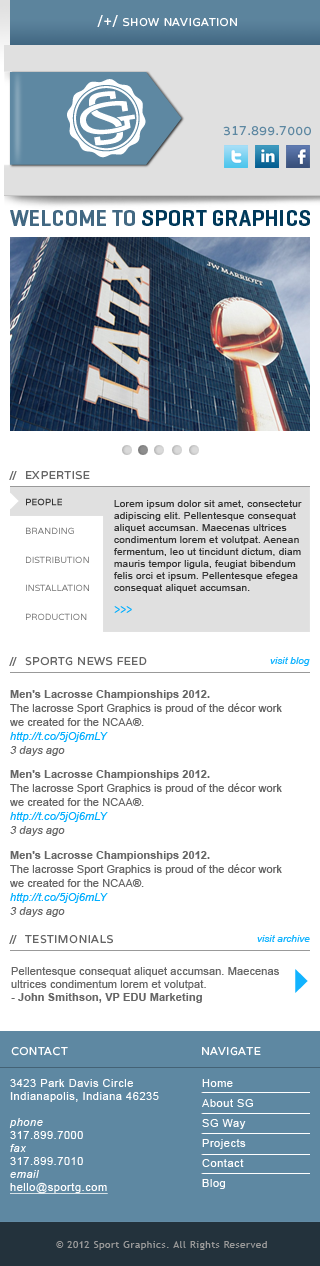
<style>
.page{position:relative;width:320px;height:1266px;background:#ffffff}
.page>*{position:absolute;margin:0}
.t1{font:11px "Varela";letter-spacing:0.05em;color:#fefefe}
.t2{font:14px "Varela";letter-spacing:0.05em;color:#fefefe}
.t3{font:12px "Varela";letter-spacing:0.05em;color:#5e88a2}
.t4{font:23px "Geogrotesque-SemiBold";color:#00395a}
.t5{font:23px "Geogrotesque-SemiBold";color:#426882}
.t6{font:11px "Varela";letter-spacing:0.05em;color:#666666}
.t7{font:9px "Varela";color:#333333;font-weight:bold}
.t8{font:10px/12px "ArialMT";letter-spacing:0.025em;color:#333333}
.t9{font:15px/12px "Arial-ItalicMT";letter-spacing:0.01em;color:#00aeff;scale:0.67 1}
.t10{font:9px "Varela";color:#717171}
.t11{font:10px "Arial-ItalicMT";letter-spacing:0.005em;color:#11b3ff}
.t12{font:11px/14px "ArialMT";letter-spacing:0.005em;color:#666666}
.t13{font:11px/14px "Arial-BoldMT";letter-spacing:0.005em;color:#666666}
.t14{font:11px/14px "Arial-ItalicMT";letter-spacing:0.005em;color:#00aeff}
.t15{font:11px/14px "Arial-ItalicMT";letter-spacing:0.005em;color:#666666}
.t16{font:11px/13px "ArialMT";letter-spacing:0.01em;color:#666666}
.t17{font:11px/13px "Arial-BoldMT";letter-spacing:0.01em;color:#666666}
.t18{font:11px/13px "ArialMT";letter-spacing:0.05em;color:#fefefe}
.t19{font:11px/13px "Arial-ItalicMT";letter-spacing:0.05em;color:#fefefe}
.t20{font:11px/13px "ArialMT";letter-spacing:0.05em;color:#fefefe;text-decoration:underline}
.t21{font:11px/20px "ArialMT";letter-spacing:0.05em;color:#fefefe}
.t22{font:10px "TrebuchetMS";letter-spacing:0.05em;color:#999999}
</style>
<div class="page">
<p class="t1" style="left:97px;top:15px;width:140px;height:12px"><span class="t2">/+/</span> SHOW NAVIGATION</p>
<p class="t3" style="left:223px;top:126px;width:88px;height:10px">317.899.7000</p>
<p class="t4" style="left:10px;top:210px;width:300px;height:16px"><span class="t5">WELCOME TO </span>SPORT GRAPHICS</p>
<p class="t6" style="left:9px;top:471px;width:81px;height:9px">//  EXPERTISE</p>
<p class="t7" style="left:26px;top:498px;width:36px;height:8px">PEOPLE</p>
<p class="t8" style="left:114px;top:500px;width:188px;height:113px">Lorem ipsum dolor sit amet, consectetur adipiscing elit. Pellentesque consequat aliquet accumsan. Maecenas ultrices condimentum lorem et volutpat. Aenean fermentum, leo ut tincidunt dictum, diam mauris tempor ligula, feugiat bibendum felis orci et ipsum. Pellentesque efegea consequat aliquet accumsan. <br><br><span class="t9">&gt;&gt;&gt;</span></p>
<p class="t10" style="left:26px;top:527px;width:48px;height:7px">BRANDING</p>
<p class="t10" style="left:26px;top:556px;width:63px;height:7px">DISTRIBUTION</p>
<p class="t10" style="left:26px;top:584px;width:63px;height:7px">INSTALLATION</p>
<p class="t10" style="left:26px;top:613px;width:61px;height:7px">PRODUCTION</p>
<p class="t6" style="left:9px;top:657px;width:138px;height:9px">//  SPORTG NEWS FEED</p>
<p class="t11" style="left:270px;top:657px;width:40px;height:9px">visit blog</p>
<p class="t12" style="left:10px;top:690px;width:272px;height:66px"><span class="t13">Men's Lacrosse Championships 2012. <br></span>The lacrosse Sport Graphics is proud of the décor work <br>we created for the NCAA®. <br><span class="t14">http://t.co/5jOj6mLY <br></span><span class="t15">3 days ago</span></p>
<p class="t12" style="left:10px;top:770px;width:272px;height:66px"><span class="t13">Men's Lacrosse Championships 2012. <br></span>The lacrosse Sport Graphics is proud of the décor work <br>we created for the NCAA®. <br><span class="t14">http://t.co/5jOj6mLY <br></span><span class="t15">3 days ago</span></p>
<p class="t12" style="left:10px;top:851px;width:272px;height:66px"><span class="t13">Men's Lacrosse Championships 2012. <br></span>The lacrosse Sport Graphics is proud of the décor work <br>we created for the NCAA®. <br><span class="t14">http://t.co/5jOj6mLY <br></span><span class="t15">3 days ago</span></p>
<p class="t6" style="left:9px;top:935px;width:104px;height:9px">//  TESTIMONIALS</p>
<p class="t11" style="left:257px;top:935px;width:53px;height:7px">visit archive</p>
<p class="t16" style="left:11px;top:967px;width:268px;height:36px">Pellentesque consequat aliquet accumsan. Maecenas ultrices condimentum lorem et volutpat.<br><span class="t17">- John Smithson, VP EDU Marketing</span></p>
<p class="t1" style="left:11px;top:1047px;width:57px;height:9px">CONTACT</p>
<p class="t1" style="left:202px;top:1047px;width:59px;height:9px">NAVIGATE</p>
<p class="t18" style="left:9px;top:1079px;width:150px;height:115px">3423 Park Davis Circle<br>Indianapolis, Indiana 46235<br><br><span class="t19">phone<br></span>317.899.7000<br><span class="t19">fax<br></span>317.899.7010<br><span class="t19">email<br></span><span class="t20">hello@sportg.com</span></p>
<p class="t21" style="left:202px;top:1079px;width:51px;height:110px">Home<br>About SG<br>SG Way<br>Projects<br>Contact<br>Blog</p>
<p class="t22" style="left:56px;top:1241px;width:211px;height:9px">© 2012 Sport Graphics. All Rights Reserved</p>
</div>
